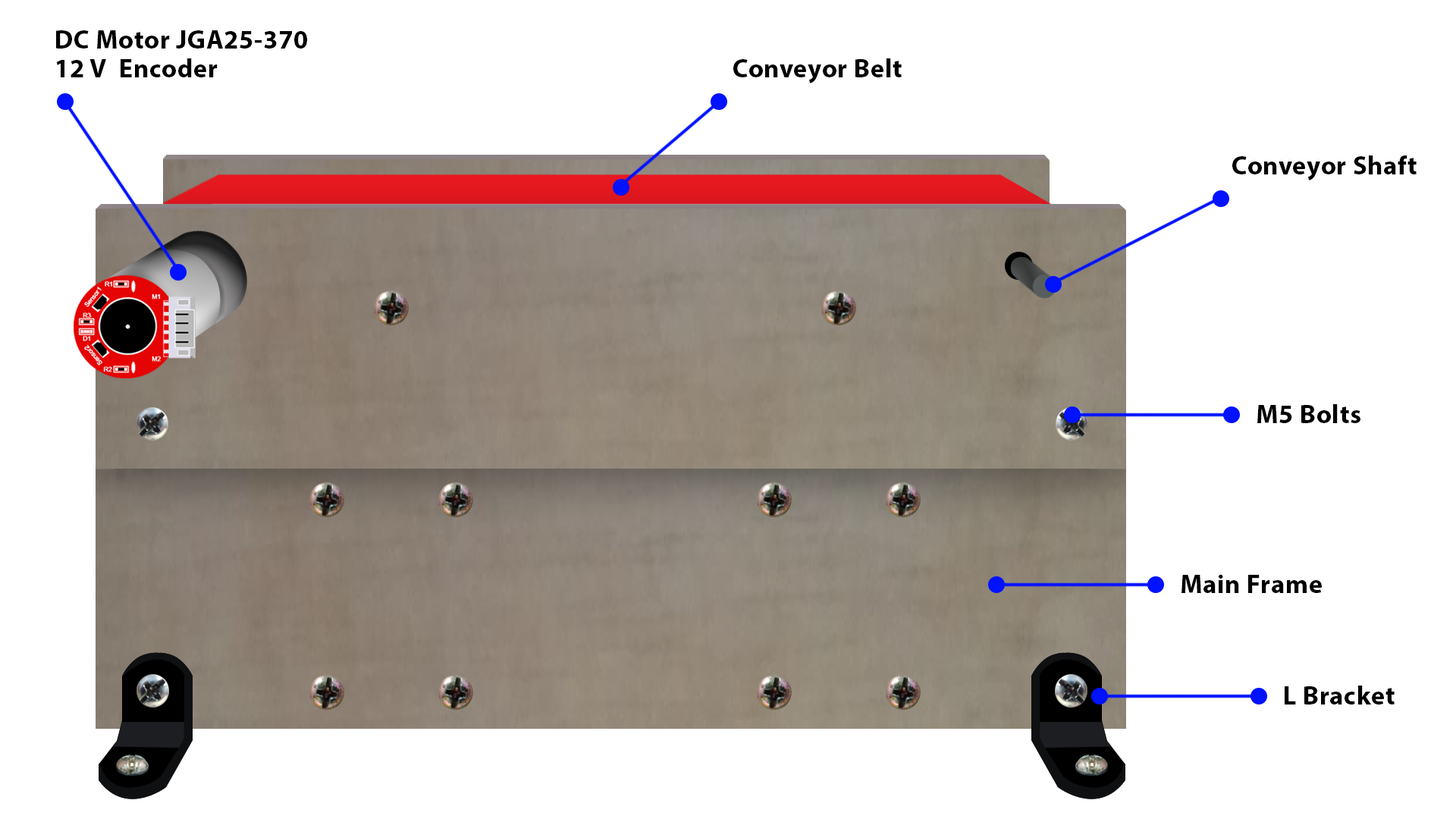
<style>
.page{position:relative;width:1456px;height:819px;background:#ffffff}
.page>*{position:absolute;margin:0}
.t1{font:26.3px/28.4px "MyriadPro-Bold";letter-spacing:0.02em;color:#000000}
.t2{font:26.3px "MyriadPro-Bold";letter-spacing:0.02em;color:#000000}
</style>
<div class="page">
<p class="t1" style="left:56px;top:30px;width:251px;height:47px">DC Motor JGA25-370 <br>12 V  Encoder</p>
<p class="t2" style="left:733px;top:58px;width:169px;height:25px">Conveyor Belt</p>
<p class="t2" style="left:1232px;top:155px;width:185px;height:25px">Conveyor Shaft</p>
<p class="t2" style="left:1257px;top:404px;width:103px;height:19px">M5 Bolts</p>
<p class="t2" style="left:1181px;top:574px;width:141px;height:19px">Main Frame</p>
<p class="t2" style="left:1285px;top:686px;width:110px;height:18px">L Bracket</p>
</div>
